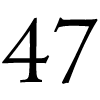
<style>
.page{position:relative;width:100px;height:100px;background:#ffffff}
.page>*{position:absolute;margin:0}
.t1{font:100px "Centaur";color:#000000}
</style>
<div class="page">
<p class="t1" style="left:2px;top:17px;width:96px;height:67px">47</p>
</div>
